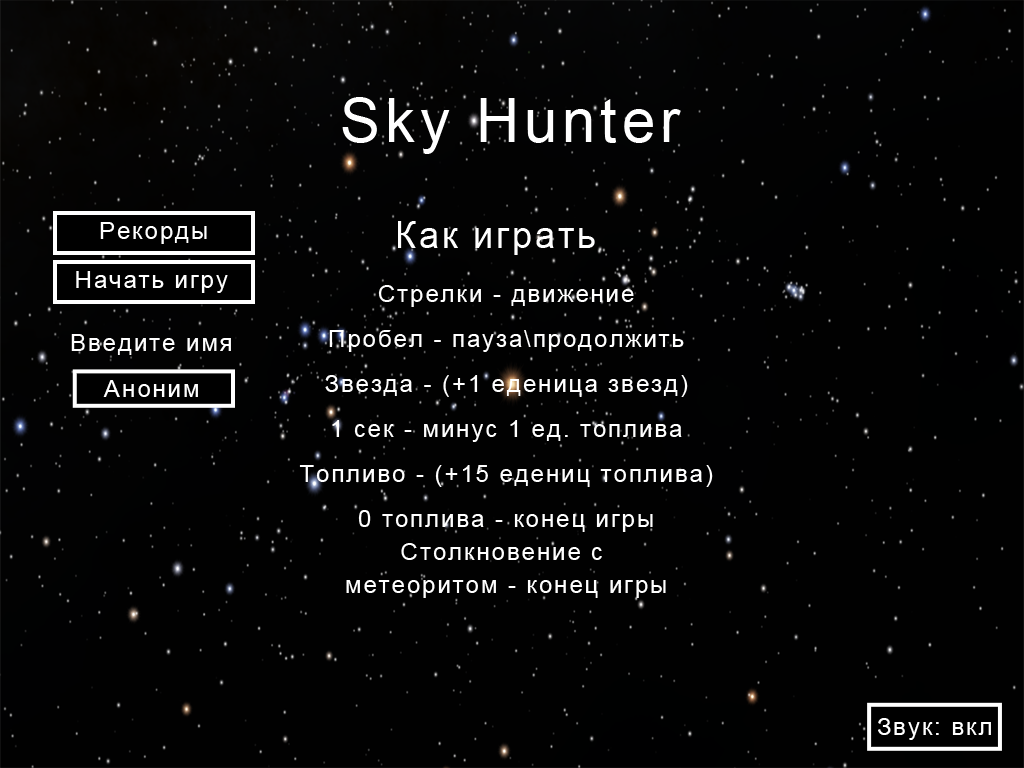
<style>
.page{position:relative;width:1024px;height:768px;background:#010101}
.page>*{position:absolute;margin:0}
.t1{font:61.2px "ArialMT";letter-spacing:0.08em;color:#ffffff}
.t2{font:24.5px "ArialMT";letter-spacing:0.08em;color:#ffffff}
.t3{font:36.7px "ArialMT";letter-spacing:0.08em;color:#ffffff}
.t4{font:24.5px/45px "ArialMT";letter-spacing:0.08em;color:#ffffff}
.t5{font:24.5px/33px "ArialMT";letter-spacing:0.08em;color:#ffffff}
</style>
<div class="page">
<p class="t1" style="left:342px;top:97px;width:339px;height:57px">Sky Hunter</p>
<p class="t2" style="left:100px;top:222px;width:107px;height:22px">Рекорды</p>
<p class="t3" style="left:398px;top:221px;width:197px;height:34px">Как играть</p>
<p class="t4" style="left:299px;top:285px;width:414px;height:313px;text-align:center">Стрелки - движение<br>Пробел - пауза\продолжить<br>Звезда - (+1 еденица звезд)<br>1 сек - минус 1 ед. топлива<br>Топливо - (+15 едениц топлива)<br>0 топлива - конец игры<br><span class="t5">Столкновение с <br>метеоритом - конец игры</span></p>
</div>
